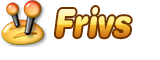
<style>
.page{position:relative;width:160px;height:60px;background:#ffffff}
.page>*{position:absolute;margin:0}
.t1{font:39.1px "FZHPJW--GB1-0";font-style:italic;scale:0.75 1}
</style>
<div class="page">
<p class="t1" style="left:56px;top:7px;width:75px;height:31px">Frivs</p>
</div>
